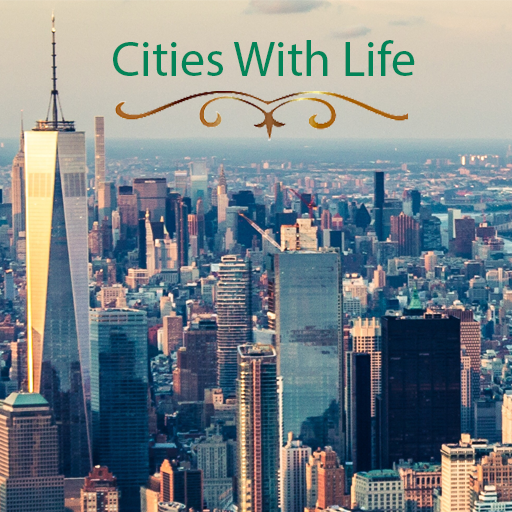
<style>
.page{position:relative;width:512px;height:512px}
.page>*{position:absolute;margin:0}
.t1{font:50px "MyriadPro-Regular";color:#028458}
</style>
<div class="page">
<p class="t1" style="left:113px;top:40px;width:302px;height:36px">Cities With Life</p>
</div>
